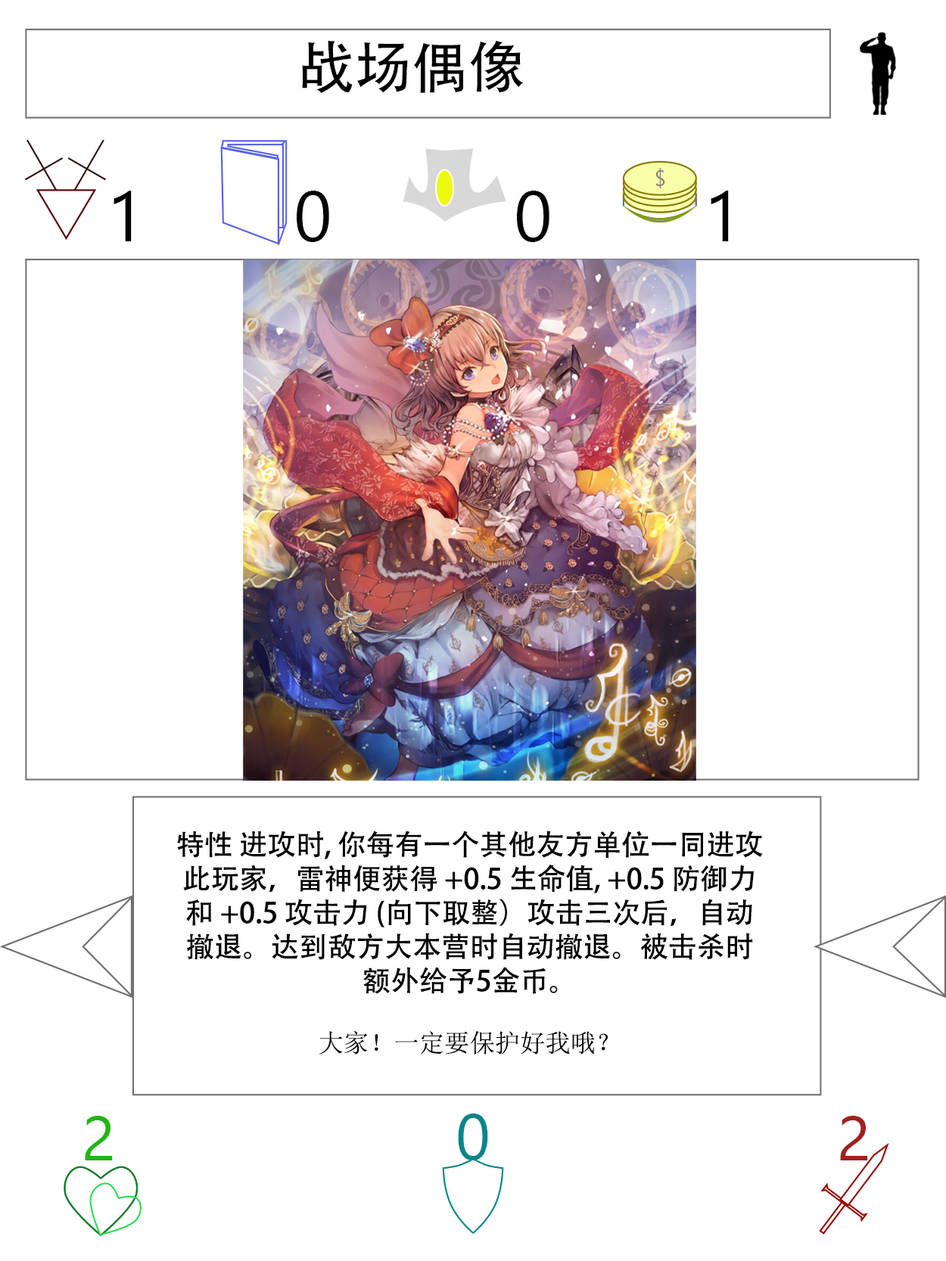
<style>
.page{position:relative;width:946px;height:1261px;background:#ffffff}
.page>*{position:absolute;margin:0}
.t1{font:56.7px "AdobeHeitiStd-Regular";color:#000000}
.t2{font:70.9px "SegoeUI";color:#000000}
.t3{font:28.4px "AdobeHeitiStd-Regular";color:#000000}
.t4{font:25.2px "NSimSun";color:#000000}
.t5{font:63px "SegoeUI";color:#22b518}
.t6{font:64.6px "SegoeUI";color:#05868a}
.t7{font:63px "SegoeUI";color:#a32020}
</style>
<div class="page">
<p class="t1" style="left:302px;top:40px;width:221px;height:53px">战场偶像</p>
<p class="t2" style="left:113px;top:191px;width:19px;height:50px">1</p>
<p class="t2" style="left:297px;top:191px;width:32px;height:51px">0</p>
<p class="t2" style="left:517px;top:191px;width:32px;height:51px">0</p>
<p class="t2" style="left:710px;top:191px;width:18px;height:50px">1</p>
<p class="t3" style="left:177px;top:831px;width:586px;height:224px;text-align:center">特性 进攻时, 你每有一个其他友方单位一同进攻此玩家，雷神便获得 +0.5 生命值, +0.5 防御力和 +0.5 攻击力 (向下取整）攻击三次后，自动撤退。达到敌方大本营时自动撤退。被击杀时额外给予5金币。<br><span class="t4"><br>大家！一定要保护好我哦？</span></p>
<p class="t5" style="left:85px;top:1116px;width:28px;height:44px">2</p>
<p class="t6" style="left:458px;top:1114px;width:30px;height:46px">0</p>
<p class="t7" style="left:840px;top:1116px;width:28px;height:44px">2</p>
</div>
